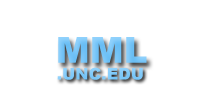
<style>
.page{position:relative;width:207px;height:99px;background:#ffffff}
.page>*{position:absolute;margin:0}
.t1{font:36px "Arial-Black";color:#68bdf4}
.t2{font:16px "Arial-Black";color:#82caf9}
</style>
<div class="page">
<p class="t1" style="left:58px;top:37px;width:89px;height:26px">MML</p>
<p class="t2" style="left:57px;top:67px;width:86px;height:13px">.UNC.EDU</p>
</div>
